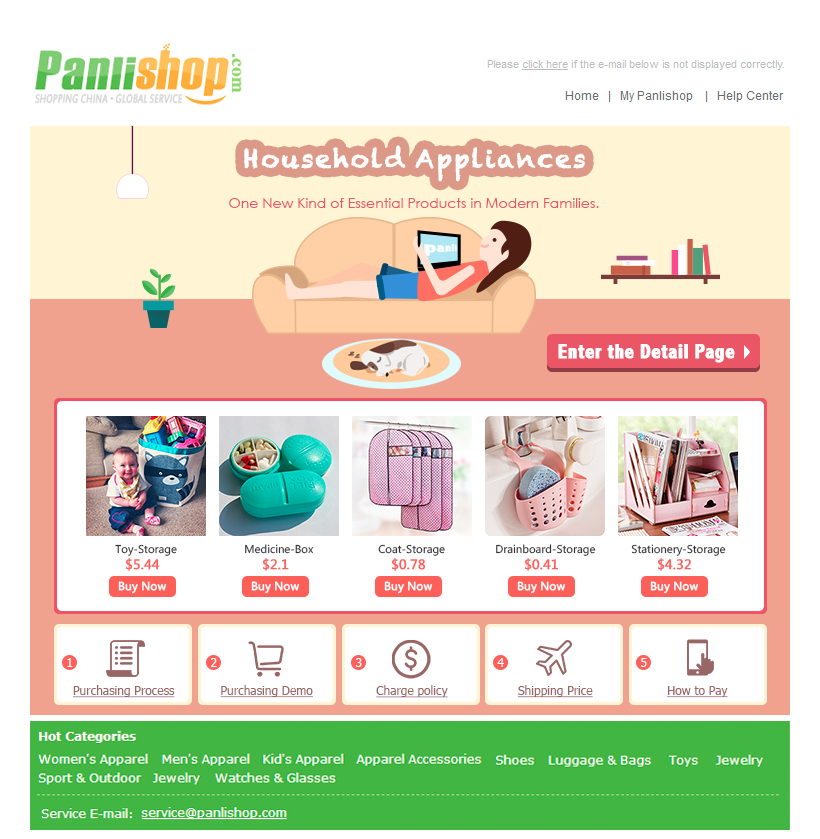
<style>
.page{position:relative;width:820px;height:839px;background:#ffffff}
.page>*{position:absolute;margin:0}
.t1{font:25px "Chalkduster";letter-spacing:0.06em;color:#ffffff;font-weight:bold}
.t2{font:14px "CenturyGothic";color:#eb5667}
.t3{font:20px "AbadiMT-CondensedExtraBold";color:#ffffff;font-weight:bold}
.t4{font:10.5px "MicrosoftYaHei";color:#333333}
.t5{font:12.7px "MicrosoftYaHei";color:#ff5f59;font-weight:bold}
.t6{font:10.8px "MicrosoftYaHei";color:#ffffff;font-weight:bold}
.t7{font:12px "Tahoma";color:#ffffff}
.t8{font:12px "Tahoma";color:#996666;text-decoration:underline}
</style>
<div class="page">
<p class="t1" style="left:244px;top:145px;width:341px;height:37px">Household Appliances</p>
<p class="t2" style="left:229px;top:198px;width:370px;height:10px">One New Kind of Essential Products in Modern Families.</p>
<p class="t3" style="left:558px;top:344px;width:177px;height:19px">Enter the Detail Page</p>
<p class="t4" style="left:115px;top:544px;width:62px;height:12px">Toy-Storage</p>
<p class="t4" style="left:245px;top:544px;width:69px;height:10px">Medicine-Box</p>
<p class="t4" style="left:378px;top:544px;width:67px;height:12px">Coat-Storage</p>
<p class="t4" style="left:496px;top:544px;width:100px;height:12px">Drainboard-Storage</p>
<p class="t4" style="left:631px;top:544px;width:95px;height:12px">Stationery-Storage</p>
<p class="t5" style="left:126px;top:558px;width:34px;height:13px">$5.44</p>
<p class="t5" style="left:263px;top:558px;width:26px;height:13px">$2.1</p>
<p class="t5" style="left:392px;top:558px;width:34px;height:13px">$0.78</p>
<p class="t5" style="left:525px;top:558px;width:34px;height:13px">$0.41</p>
<p class="t5" style="left:658px;top:558px;width:33px;height:13px">$4.32</p>
<p class="t6" style="left:118px;top:581px;width:49px;height:13px">Buy Now</p>
<p class="t6" style="left:251px;top:581px;width:49px;height:13px">Buy Now</p>
<p class="t6" style="left:384px;top:581px;width:49px;height:13px">Buy Now</p>
<p class="t6" style="left:517px;top:581px;width:49px;height:13px">Buy Now</p>
<p class="t6" style="left:650px;top:581px;width:49px;height:13px">Buy Now</p>
<p class="t7" style="left:67px;top:658px;width:6px;height:9px">1</p>
<p class="t7" style="left:211px;top:658px;width:6px;height:9px">2</p>
<p class="t7" style="left:355px;top:658px;width:7px;height:9px">3</p>
<p class="t7" style="left:497px;top:658px;width:7px;height:9px">4</p>
<p class="t7" style="left:641px;top:658px;width:6px;height:9px">5</p>
<p class="t8" style="left:73px;top:685px;width:102px;height:13px">Purchasing Process</p>
<p class="t8" style="left:220px;top:685px;width:93px;height:13px">Purchasing Demo</p>
<p class="t8" style="left:376px;top:685px;width:72px;height:13px">Charge policy</p>
<p class="t8" style="left:517px;top:685px;width:76px;height:13px">Shipping Price</p>
<p class="t8" style="left:667px;top:686px;width:61px;height:12px">How to Pay</p>
</div>
